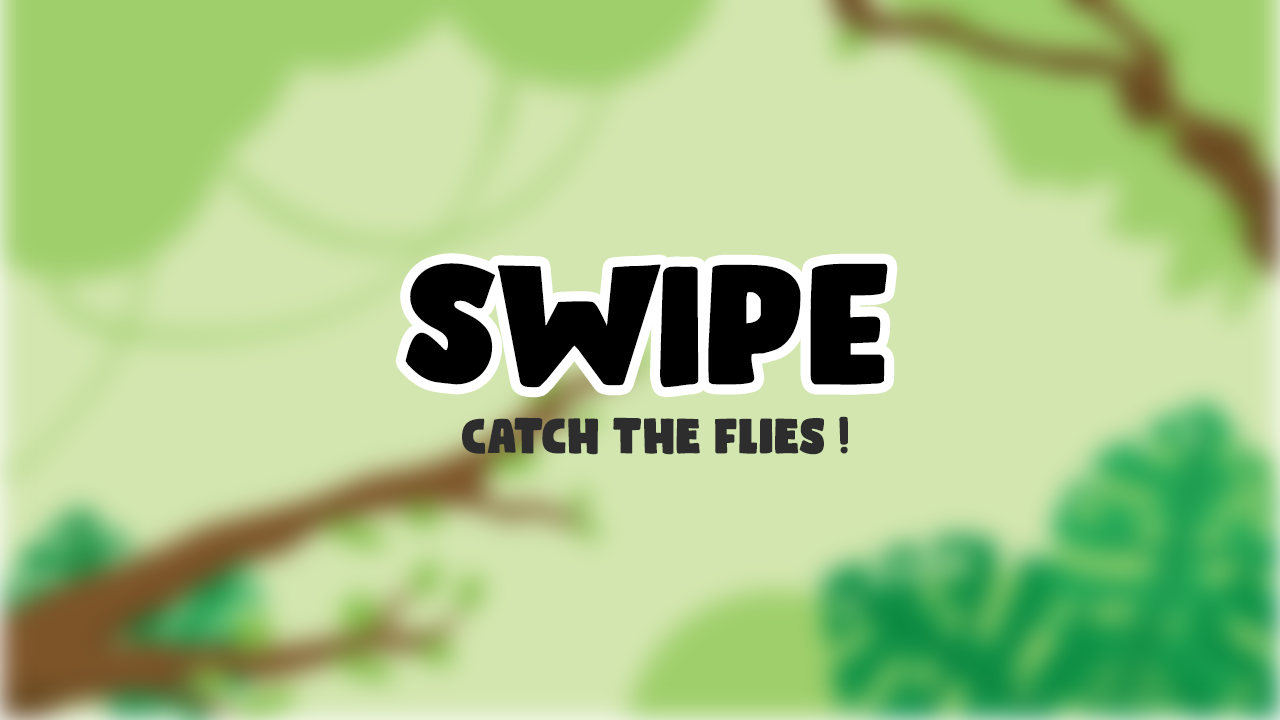
<style>
.page{position:relative;width:1280px;height:720px;background:#d3e6af}
.page>*{position:absolute;margin:0}
.t1{font:170.9px "BumperStickerDEMO-Regular";color:#000000}
.t2{font:50px "BumperStickerDEMO-Regular";color:#2d2d2d}
</style>
<div class="page">
<p class="t1" style="left:405px;top:263px;width:483px;height:125px">SWIPE</p>
<p class="t2" style="left:462px;top:416px;width:386px;height:39px">Catch the flies !</p>
</div>
